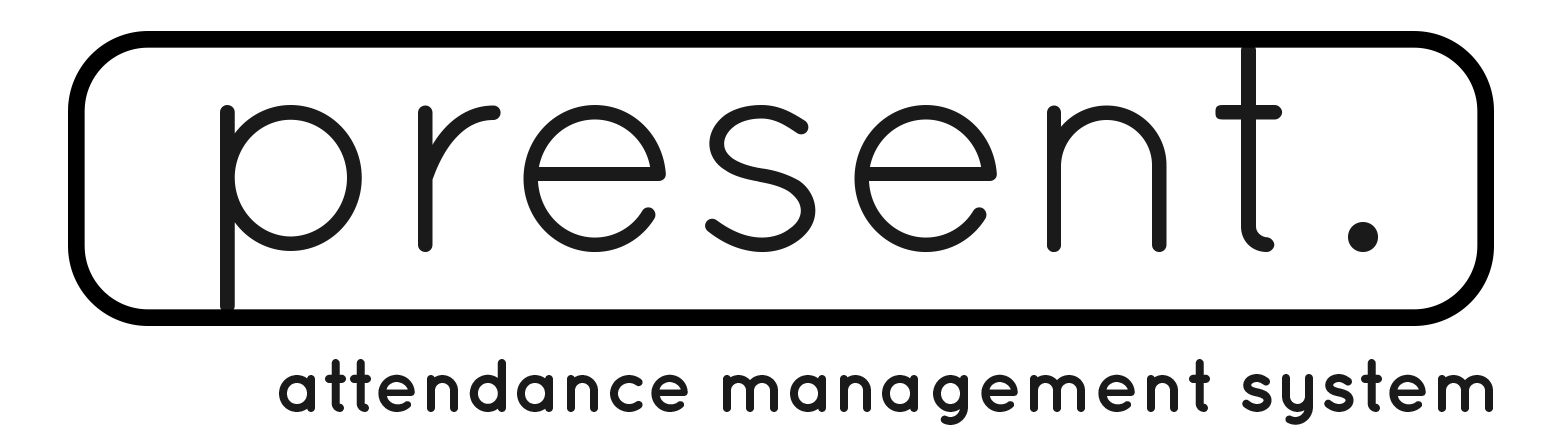
<style>
.page{position:relative;width:1562px;height:446px;background:#ffffff}
.page>*{position:absolute;margin:0}
.t1{font:300px "QuicksandBook-Regular";color:#1a1a1a}
.t2{font:75px "QuicksandBold-Regular";color:#1a1a1a}
</style>
<div class="page">
<p class="t1" style="left:220px;top:43px;width:1158px;height:270px">present.</p>
<p class="t2" style="left:279px;top:359px;width:1214px;height:66px">attendance management system</p>
</div>
